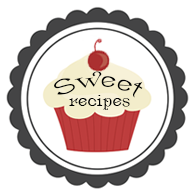
<style>
.page{position:relative;width:195px;height:196px;background:#ffffff}
.page>*{position:absolute;margin:0}
.t1{font:23.9px "Ametist";color:#000102;scale:1.06 1}
.t2{font:18.1px "Ametist";color:#000102}
</style>
<div class="page">
<p class="t1" style="left:54px;top:71px;width:89px;height:27px">Sweet</p>
<p class="t2" style="left:69px;top:95px;width:61px;height:15px">recipes</p>
</div>
